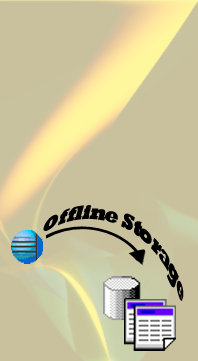
<style>
.page{position:relative;width:198px;height:361px;background:#c9c19e}
.page>*{position:absolute;margin:0}
.t1{font:21.6px "Rockwell-ExtraBold";color:#000000;scale:0.82 1}
</style>
<div class="page">
<p class="t1" style="left:43px;top:205px;width:141px;height:96px;rotate:26deg">Offline Storage</p>
</div>
